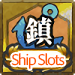
<style>
.page{position:relative;width:75px;height:75px}
.page>*{position:absolute;margin:0}
.t1{font:16px "AdobeClean-Regular";letter-spacing:-0.08em;color:#ff5a00}
</style>
<div class="page">
<p class="t1" style="left:11px;top:53px;width:54px;height:16px">Ship Slots</p>
</div>
